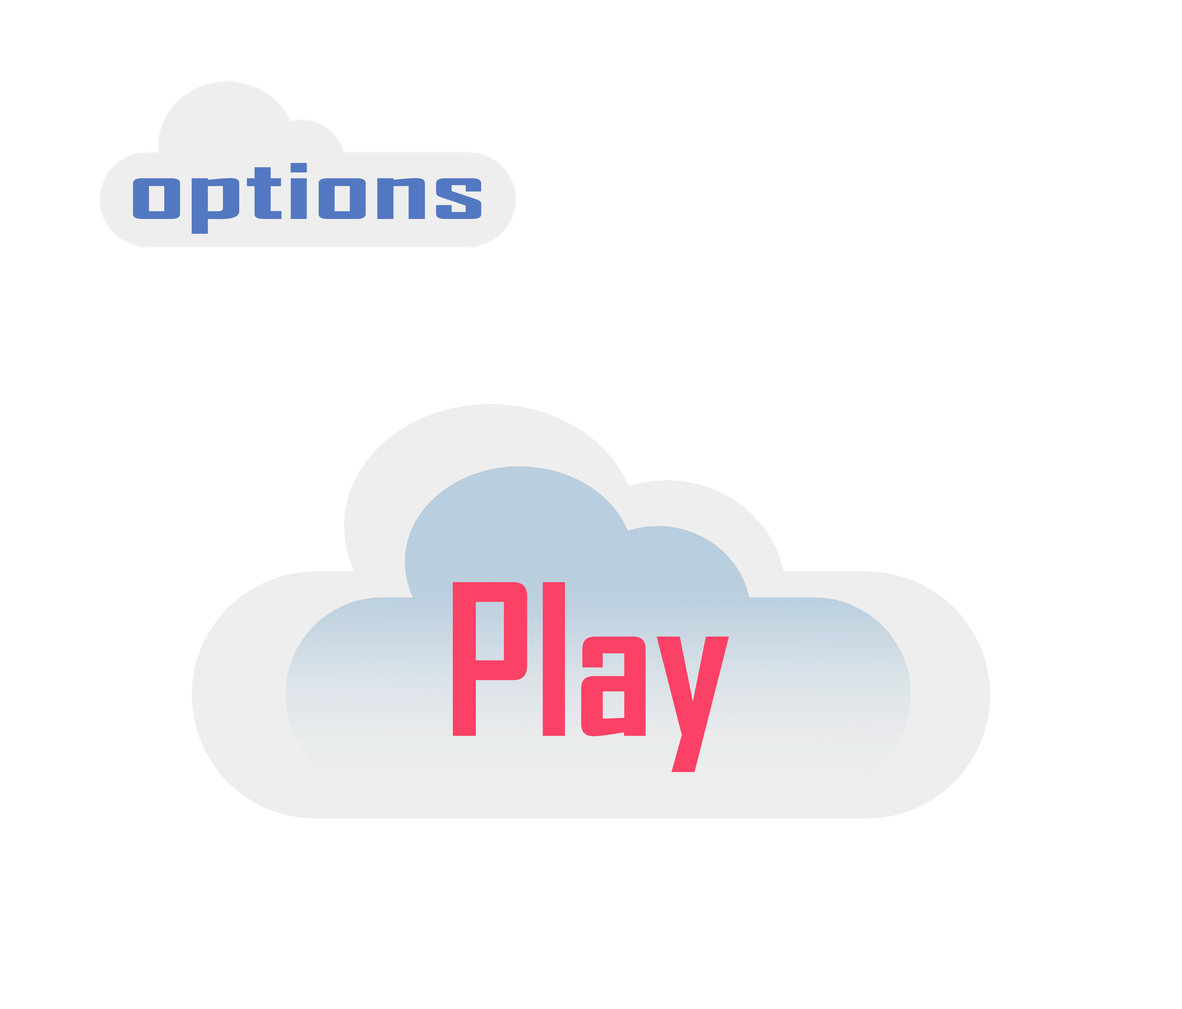
<style>
.page{position:relative;width:1182px;height:1009px;background:#ffffff}
.page>*{position:absolute;margin:0}
.t1{font:82.4px "AgencyFB-Bold";color:#5378c2;scale:1.75 1}
.t2{font:201.1px "AgencyFB-Bold";color:#fb4165}
</style>
<div class="page">
<p class="t1" style="left:133px;top:163px;width:348px;height:71px">options</p>
<p class="t2" style="left:453px;top:582px;width:276px;height:190px">Play</p>
</div>
